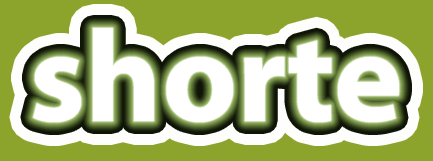
<style>
.page{position:relative;width:433px;height:161px;background:#8ca42b}
.page>*{position:absolute;margin:0}
.t1{font:130.5px "MyriadPro-Bold";color:#ffffff}
</style>
<div class="page">
<p class="t1" style="left:33px;top:28px;width:366px;height:94px">shorte</p>
<p class="t1" style="left:33px;top:28px;width:366px;height:94px">shorte</p>
</div>
